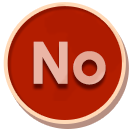
<style>
.page{position:relative;width:132px;height:132px;background:#ffffff}
.page>*{position:absolute;margin:0}
.t1{font:59.6px "Righteous-Regular";letter-spacing:0.02em;color:#eab5a5}
</style>
<div class="page">
<p class="t1" style="left:33px;top:41px;width:73px;height:44px">No</p>
</div>
